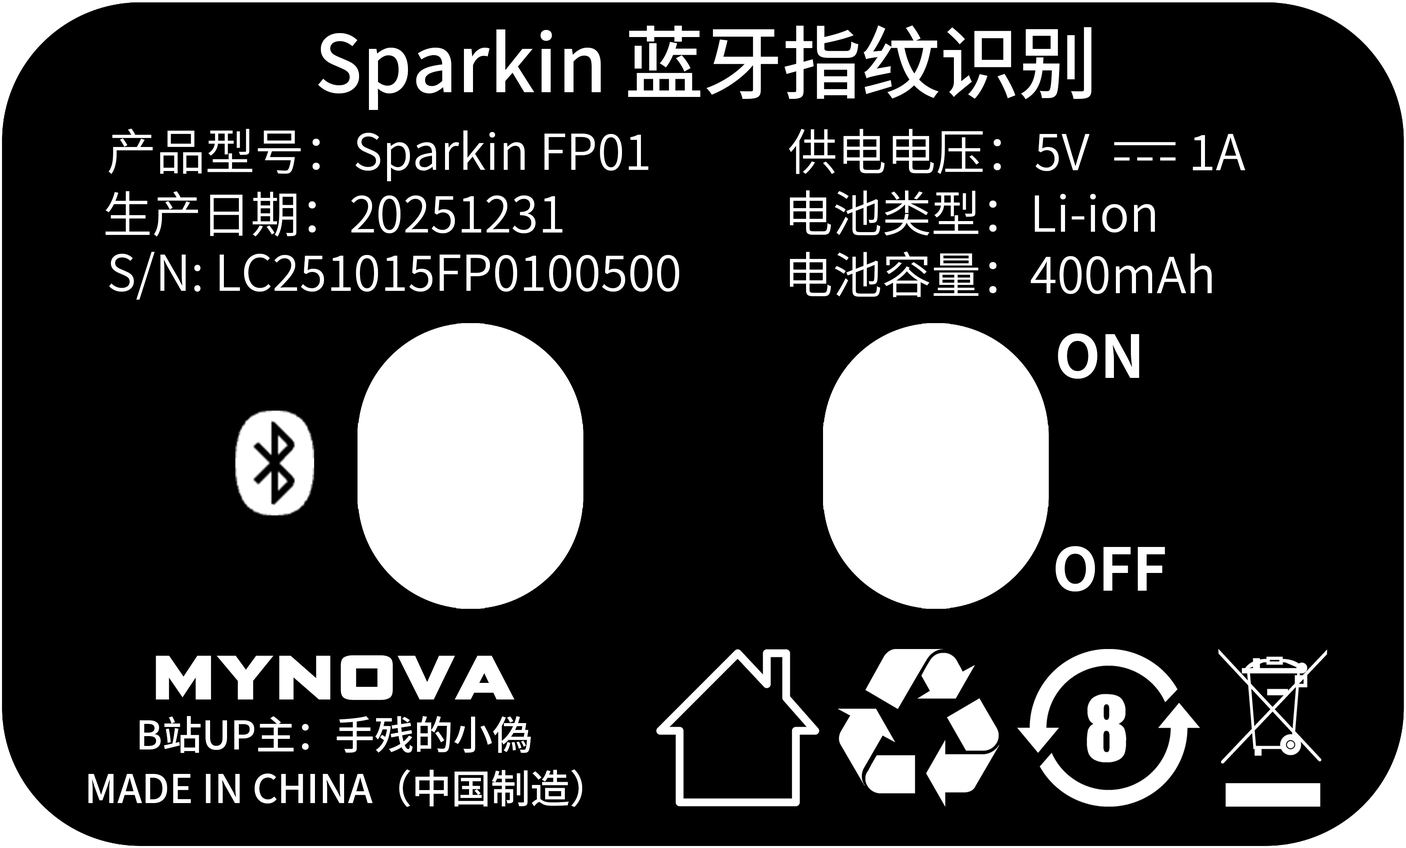
<style>
.page{position:relative;width:1406px;height:848px;background:#000000}
.page>*{position:absolute;margin:0}
.t1{font:78.8px "SourceHanSansSC-Medium";color:#ffffff}
.t2{font:49.3px "SourceHanSansSC-Normal";color:#ffffff}
.t3{font:59.1px "SourceHanSansSC-Bold";color:#ffffff}
.t4{font:62.4px "ScienceGothic-ExtraBold";color:#ffffff}
.t5{font:39.4px "SourceHanSansSC-Medium";color:#ffffff}
</style>
<div class="page">
<p class="t1" style="left:318px;top:25px;width:773px;height:85px">Sparkin 蓝牙指纹识别</p>
<p class="t2" style="left:108px;top:128px;width:540px;height:53px">产品型号：Sparkin FP01</p>
<p class="t2" style="left:789px;top:129px;width:456px;height:45px">供电电压：5V         1A</p>
<p class="t2" style="left:105px;top:191px;width:457px;height:46px">生产日期：20251231</p>
<p class="t2" style="left:790px;top:190px;width:365px;height:46px">电池类型：Li-ion</p>
<p class="t2" style="left:109px;top:252px;width:570px;height:48px">S/N: LC251015FP0100500</p>
<p class="t2" style="left:790px;top:251px;width:422px;height:46px">电池容量：400mAh</p>
<p class="t3" style="left:1058px;top:333px;width:81px;height:46px">ON</p>
<p class="t3" style="left:1055px;top:546px;width:110px;height:46px">OFF</p>
<p class="t4" style="left:156px;top:655px;width:358px;height:45px">MYNOVA</p>
<p class="t5" style="left:140px;top:716px;width:391px;height:37px">B站UP主：手残的小偽</p>
<p class="t5" style="left:88px;top:769px;width:494px;height:38px">MADE IN CHINA（中国制造）</p>
</div>
